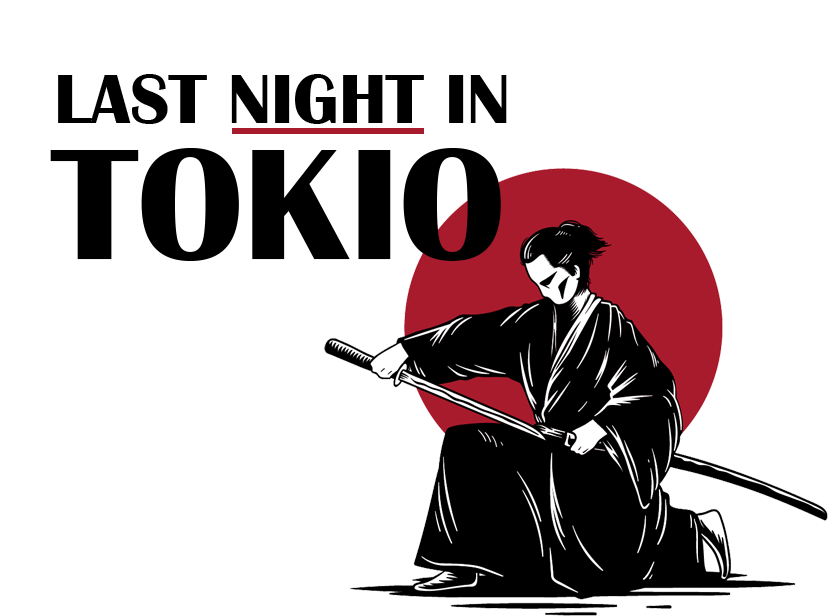
<style>
.page{position:relative;width:828px;height:616px;background:#ffffff}
.page>*{position:absolute;margin:0}
.t1{font:72px "BritannicBold";color:#000000;text-transform:uppercase}
.t2{font:164px "BritannicBold";color:#000000;text-transform:uppercase}
</style>
<div class="page">
<p class="t1" style="left:58px;top:74px;width:449px;height:50px">Last night in</p>
<p class="t2" style="left:50px;top:148px;width:451px;height:113px">tokio</p>
</div>
